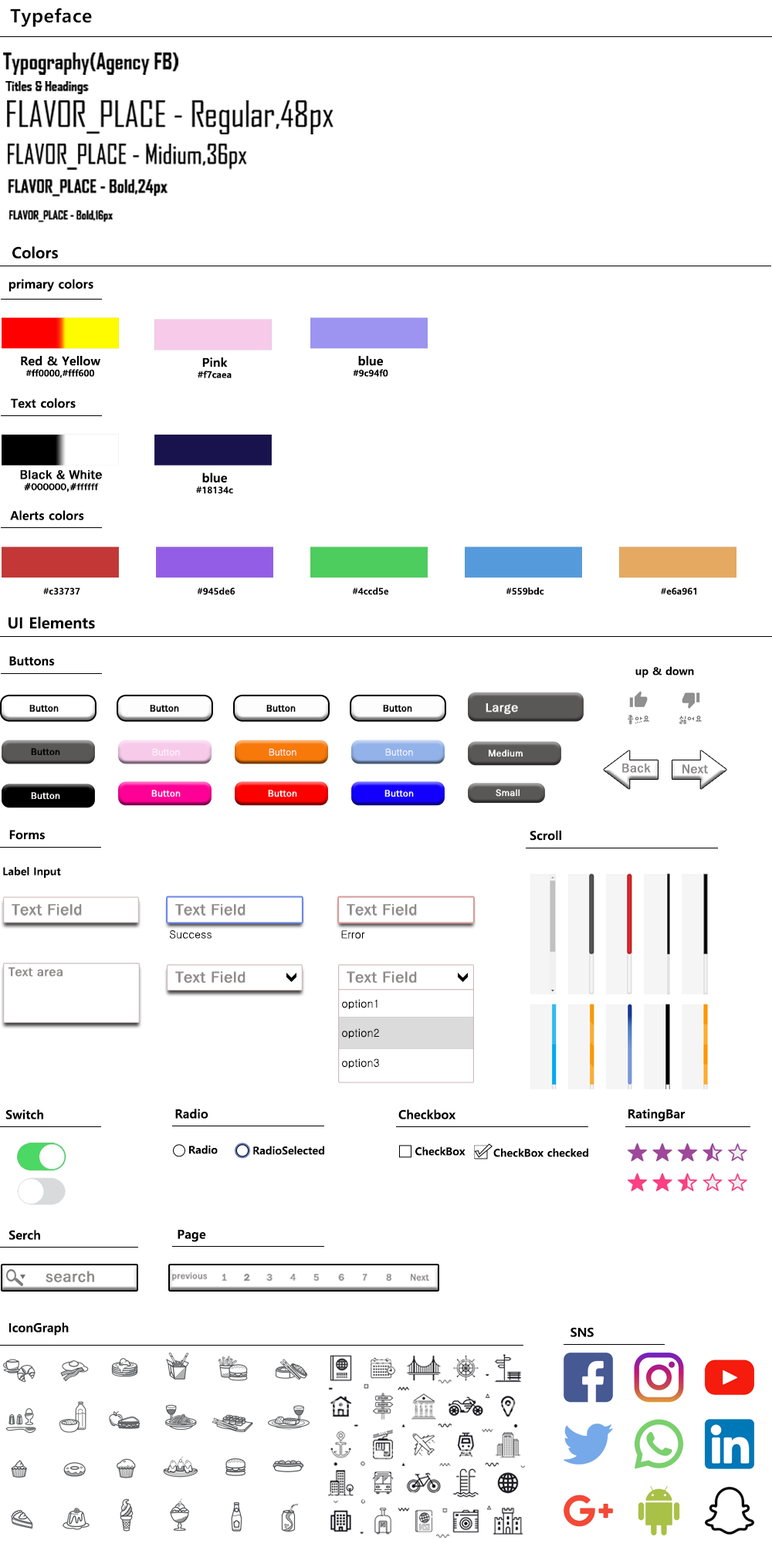
<style>
.page{position:relative;width:772px;height:1544px;background:#ffffff}
.page>*{position:absolute;margin:0}
.t1{font:18.5px "MalgunGothicBold";letter-spacing:0.025em;color:#000000}
.t2{font:21.6px "AgencyFB-Bold";color:#000000}
.t3{font:14px "AgencyFB-Bold";color:#000000}
.t4{font:34.6px "AgencyFB-Reg";color:#000000}
.t5{font:25.9px "AgencyFB-Reg";color:#000000}
.t6{font:17.3px "AgencyFB-Bold";color:#000000}
.t7{font:11.5px "AgencyFB-Bold";color:#000000}
.t8{font:15.4px "MalgunGothicBold";color:#000000}
.t9{font:12.3px "MalgunGothicBold";color:#000000}
.t10{font:9.2px "MalgunGothicBold";color:#000000}
.t11{font:9.2px "HYsupM";color:#000000}
.t12{font:12.3px "HYsupM";color:#000000}
.t13{font:10.8px "MalgunGothicBold";color:#000000}
.t14{font:9.2px "HYsupM";color:#010101}
.t15{font:12.3px "HYsupM";color:#fffcfc}
.t16{font:9.2px "Gulim";color:#fffcfc}
.t17{font:9.2px "HYsupM";color:#fffcfc}
.t18{font:12.4px "HYsupM";color:#8f8b8b}
.t19{font:15.4px "HYsupM";color:#8f8b8b}
.t20{font:10.8px "Gulim";color:#000000}
.t21{font:12.3px "HYsupM";color:#8f8b8b}
.t22{font:8.7px "HYsupM";color:#8f8b8b}
</style>
<div class="page">
<p class="t1" style="left:10px;top:8px;width:82px;height:19px">Typeface</p>
<p class="t2" style="left:3px;top:53px;width:175px;height:22px">Typography(Agency FB)</p>
<p class="t3" style="left:5px;top:81px;width:84px;height:13px">Titles &amp; Headings</p>
<p class="t4" style="left:7px;top:100px;width:327px;height:34px">FLAVOR_PLACE - Regular,48px</p>
<p class="t5" style="left:8px;top:144px;width:239px;height:26px">FLAVOR_PLACE - Midium,36px</p>
<p class="t6" style="left:8px;top:179px;width:160px;height:18px">FLAVOR_PLACE - Bold,24px</p>
<p class="t7" style="left:9px;top:210px;width:104px;height:12px">FLAVOR_PLACE - Bold,16px</p>
<p class="t8" style="left:12px;top:246px;width:46px;height:13px">Colors</p>
<p class="t9" style="left:8px;top:279px;width:85px;height:13px">primary colors</p>
<p class="t10" style="left:21px;top:356px;width:79px;height:22px;text-align:center"><span class="t9">Red &amp; Yellow<br></span>#ff0000,#fff600</p>
<p class="t10" style="left:198px;top:358px;width:34px;height:20px;text-align:center"><span class="t9">Pink<br></span>#f7caea</p>
<p class="t10" style="left:353px;top:356px;width:35px;height:21px;text-align:center"><span class="t9">blue<br></span>#9c94f0</p>
<p class="t9" style="left:11px;top:398px;width:65px;height:10px">Text colors</p>
<p class="t11" style="left:20px;top:470px;width:82px;height:22px;text-align:center"><span class="t12">Black &amp; White<br></span>#000000,#ffffff</p>
<p class="t10" style="left:196px;top:473px;width:37px;height:21px;text-align:center"><span class="t9">blue<br></span>#18134c</p>
<p class="t9" style="left:10px;top:510px;width:74px;height:10px">Alerts colors</p>
<p class="t10" style="left:43px;top:588px;width:37px;height:7px">#c33737</p>
<p class="t10" style="left:197px;top:588px;width:39px;height:7px">#945de6</p>
<p class="t10" style="left:352px;top:588px;width:37px;height:7px">#4ccd5e</p>
<p class="t10" style="left:506px;top:588px;width:38px;height:7px">#559bdc</p>
<p class="t10" style="left:661px;top:588px;width:35px;height:7px">#e6a961</p>
<p class="t8" style="left:8px;top:616px;width:87px;height:13px">UI Elements</p>
<p class="t9" style="left:9px;top:656px;width:46px;height:10px">Buttons</p>
<p class="t13" style="left:635px;top:666px;width:59px;height:12px">up &amp; down</p>
<p class="t11" style="left:29px;top:705px;width:30px;height:7px">Button</p>
<p class="t14" style="left:150px;top:705px;width:29px;height:7px">Button</p>
<p class="t14" style="left:266px;top:705px;width:30px;height:7px">Button</p>
<p class="t14" style="left:383px;top:705px;width:29px;height:7px">Button</p>
<p class="t15" style="left:486px;top:703px;width:32px;height:11px">Large</p>
<p class="t11" style="left:31px;top:748px;width:29px;height:7px">Button</p>
<p class="t16" style="left:152px;top:748px;width:28px;height:8px">Button</p>
<p class="t16" style="left:269px;top:748px;width:28px;height:8px">Button</p>
<p class="t16" style="left:385px;top:748px;width:28px;height:8px">Button</p>
<p class="t17" style="left:489px;top:750px;width:34px;height:7px">Medium</p>
<p class="t18" style="left:622px;top:764px;width:29px;height:9px">Back</p>
<p class="t18" style="left:683px;top:764px;width:25px;height:10px">Next</p>
<p class="t17" style="left:31px;top:792px;width:29px;height:7px">Button</p>
<p class="t17" style="left:151px;top:790px;width:30px;height:7px">Button</p>
<p class="t17" style="left:268px;top:790px;width:29px;height:7px">Button</p>
<p class="t17" style="left:385px;top:790px;width:29px;height:7px">Button</p>
<p class="t17" style="left:496px;top:789px;width:24px;height:8px">Small</p>
<p class="t9" style="left:9px;top:830px;width:36px;height:10px">Forms</p>
<p class="t9" style="left:530px;top:830px;width:31px;height:11px">Scroll</p>
<p class="t13" style="left:3px;top:867px;width:58px;height:12px">Label Input</p>
<p class="t19" style="left:12px;top:904px;width:70px;height:12px">Text Field</p>
<p class="t19" style="left:175px;top:904px;width:71px;height:12px">Text Field</p>
<p class="t19" style="left:347px;top:904px;width:70px;height:12px">Text Field</p>
<p class="t20" style="left:170px;top:930px;width:42px;height:9px">Success</p>
<p class="t20" style="left:341px;top:930px;width:24px;height:9px">Error</p>
<p class="t21" style="left:8px;top:968px;width:55px;height:9px">Text area</p>
<p class="t19" style="left:175px;top:971px;width:71px;height:12px">Text Field</p>
<p class="t19" style="left:347px;top:971px;width:70px;height:12px">Text Field</p>
<p class="t20" style="left:342px;top:999px;width:36px;height:11px">option1</p>
<p class="t20" style="left:342px;top:1029px;width:37px;height:10px">option2</p>
<p class="t20" style="left:342px;top:1059px;width:37px;height:10px">option3</p>
<p class="t9" style="left:5px;top:1110px;width:38px;height:10px">Switch</p>
<p class="t9" style="left:175px;top:1109px;width:33px;height:10px">Radio</p>
<p class="t9" style="left:398px;top:1110px;width:58px;height:10px">Checkbox</p>
<p class="t9" style="left:629px;top:1109px;width:57px;height:13px">RatingBar</p>
<p class="t13" style="left:189px;top:1145px;width:29px;height:9px">Radio</p>
<p class="t13" style="left:253px;top:1146px;width:71px;height:9px">RadioSelected</p>
<p class="t13" style="left:415px;top:1147px;width:51px;height:9px">CheckBox</p>
<p class="t13" style="left:493px;top:1148px;width:95px;height:9px">CheckBox checked</p>
<p class="t9" style="left:8px;top:1230px;width:32px;height:10px">Serch</p>
<p class="t9" style="left:178px;top:1230px;width:28px;height:12px">Page</p>
<p class="t19" style="left:46px;top:1271px;width:48px;height:12px">search</p>
<p class="t22" style="left:172px;top:1273px;width:35px;height:8px">previous</p>
<p class="t22" style="left:222px;top:1274px;width:5px;height:7px">1</p>
<p class="t22" style="left:244px;top:1274px;width:6px;height:7px">2</p>
<p class="t22" style="left:244px;top:1274px;width:6px;height:7px">2</p>
<p class="t22" style="left:266px;top:1274px;width:7px;height:7px">3</p>
<p class="t22" style="left:290px;top:1274px;width:7px;height:7px">4</p>
<p class="t22" style="left:313px;top:1274px;width:6px;height:7px">5</p>
<p class="t22" style="left:338px;top:1274px;width:6px;height:7px">6</p>
<p class="t22" style="left:363px;top:1274px;width:5px;height:7px">7</p>
<p class="t22" style="left:386px;top:1274px;width:5px;height:7px">8</p>
<p class="t22" style="left:411px;top:1274px;width:18px;height:7px">Next</p>
<p class="t9" style="left:9px;top:1323px;width:60px;height:13px">IconGraph</p>
<p class="t9" style="left:571px;top:1327px;width:23px;height:10px">SNS</p>
</div>
